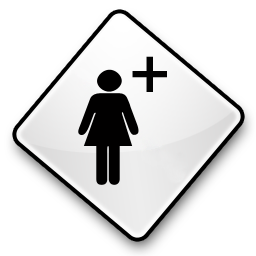
<style>
.page{position:relative;width:256px;height:256px;background:#ffffff}
.page>*{position:absolute;margin:0}
.t1{font:66px "MyriadPro-Bold";letter-spacing:0.005em;color:#020202}
</style>
<div class="page">
<p class="t1" style="left:132px;top:56px;width:35px;height:36px">+</p>
</div>
